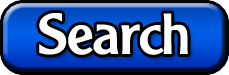
<style>
.page{position:relative;width:229px;height:75px}
.page>*{position:absolute;margin:0}
.t1{font:57px "ClearDBNormal";color:#ffffff;scale:1.13 1}
</style>
<div class="page">
<p class="t1" style="left:39px;top:13px;width:149px;height:42px">Search</p>
</div>
